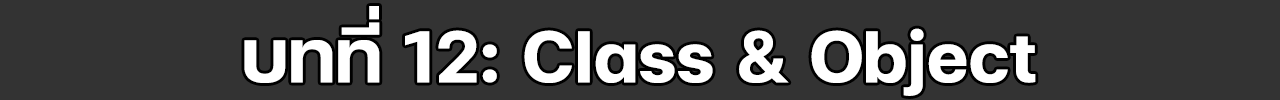
<style>
.page{position:relative;width:1280px;height:100px;background:#333333}
.page>*{position:absolute;margin:0}
.t1{font:100px "FCMinimalBold";color:#ffffff}
</style>
<div class="page">
<p class="t1" style="left:244px;top:6px;width:792px;height:90px">บทที่ 12: Class &amp; Object</p>
</div>
